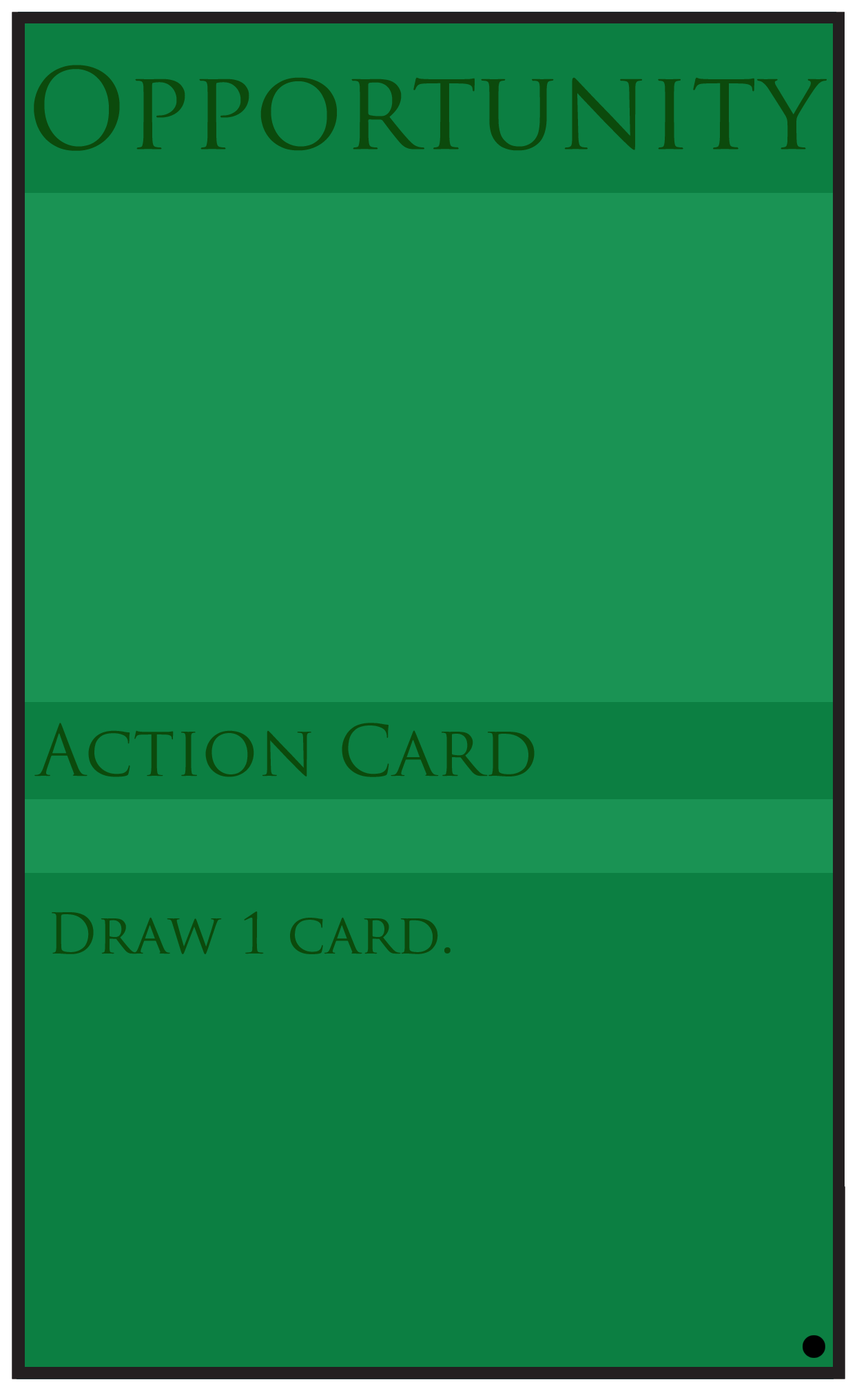
<style>
.page{position:relative;width:857px;height:1391px;background:#0c7f42}
.page>*{position:absolute;margin:0}
.t1{font:109.1px "TrajanPro-Regular";color:#0c4a0c}
.t2{font:68.9px "TrajanPro-Regular";color:#0c4a0c}
.t3{font:54.5px "TrajanPro-Regular";color:#0c4a0c}
</style>
<div class="page">
<p class="t1" style="left:34px;top:65px;width:793px;height:86px">Opportunity</p>
<p class="t2" style="left:34px;top:723px;width:501px;height:54px">Action Card</p>
<p class="t3" style="left:52px;top:912px;width:399px;height:42px">Draw 1 card.</p>
</div>
